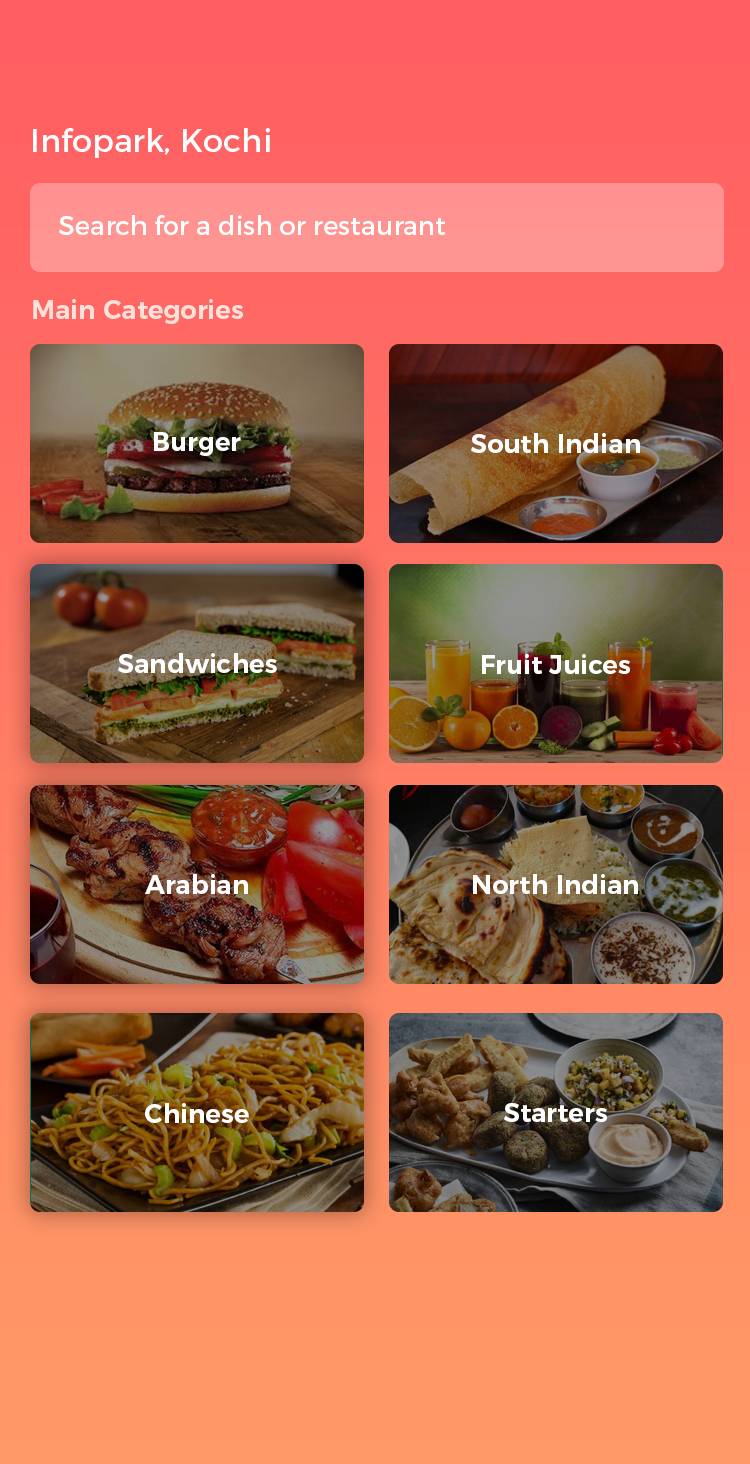
<style>
.page{position:relative;width:750px;height:1464px}
.page>*{position:absolute;margin:0}
.t1{font:32px "Montserrat-Regular";color:#ffffff}
.t2{font:26px "Montserrat-Regular";color:#ffffff}
.t3{font:26px "Montserrat-SemiBold";color:#ffe0db}
.t4{font:26px "Montserrat-SemiBold";color:#ffffff}
</style>
<div class="page">
<p class="t1" style="left:33px;top:128px;width:237px;height:30px">Infopark, Kochi</p>
<p class="t2" style="left:59px;top:215px;width:387px;height:20px">Search for a dish or restaurant</p>
<p class="t3" style="left:33px;top:299px;width:210px;height:25px">Main Categories</p>
<p class="t4" style="left:154px;top:432px;width:87px;height:24px">Burger</p>
<p class="t4" style="left:471px;top:433px;width:169px;height:20px">South Indian</p>
<p class="t4" style="left:118px;top:653px;width:159px;height:20px">Sandwiches</p>
<p class="t4" style="left:482px;top:654px;width:148px;height:20px">Fruit Juices</p>
<p class="t4" style="left:145px;top:874px;width:103px;height:20px">Arabian</p>
<p class="t4" style="left:473px;top:874px;width:165px;height:20px">North Indian</p>
<p class="t4" style="left:145px;top:1103px;width:104px;height:20px">Chinese</p>
<p class="t4" style="left:504px;top:1103px;width:103px;height:19px">Starters</p>
</div>
